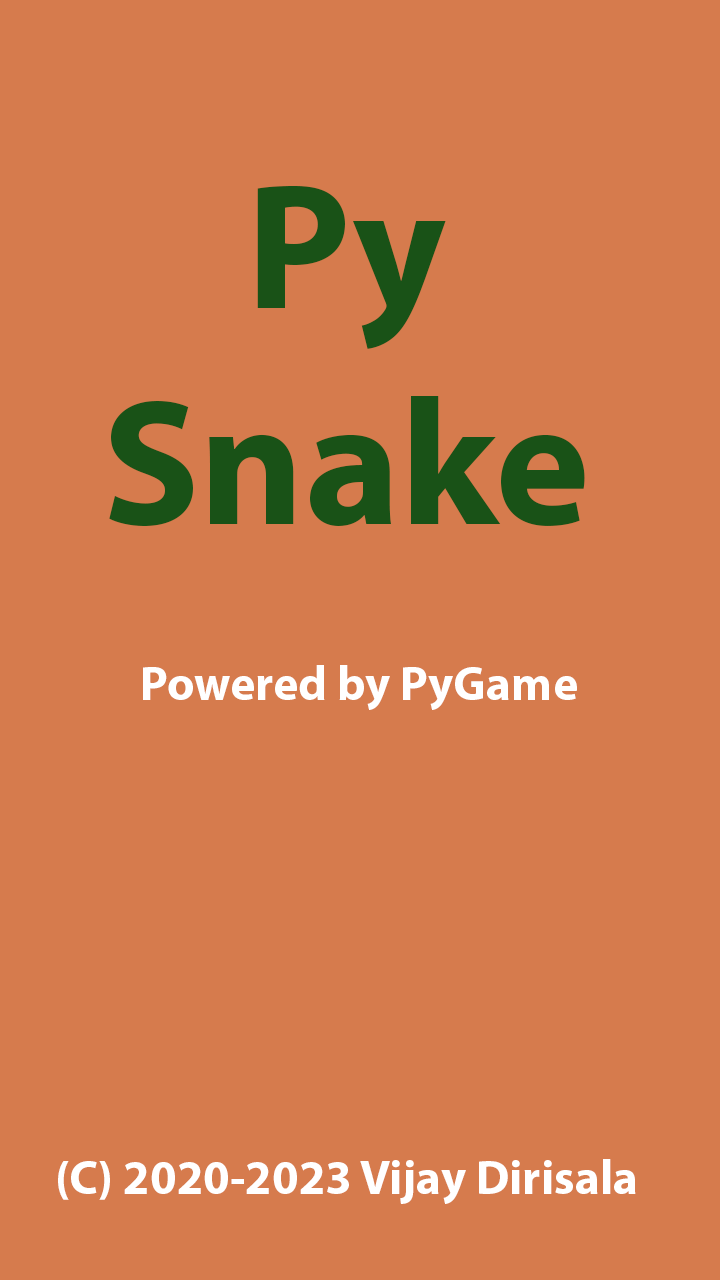
<style>
.page{position:relative;width:720px;height:1280px;background:#d67b4d}
.page>*{position:absolute;margin:0}
.t1{font:180px "MyriadPro-Bold";color:#195217}
.t2{font:48px "MyriadPro-Bold";color:#ffffff}
</style>
<div class="page">
<p class="t1" style="left:109px;top:186px;width:476px;height:340px;text-align:center">Py<br>Snake</p>
<p class="t2" style="left:143px;top:665px;width:434px;height:45px">Powered by PyGame</p>
<p class="t2" style="left:58px;top:1159px;width:578px;height:45px">(C) 2020-2023 Vijay Dirisala</p>
</div>
